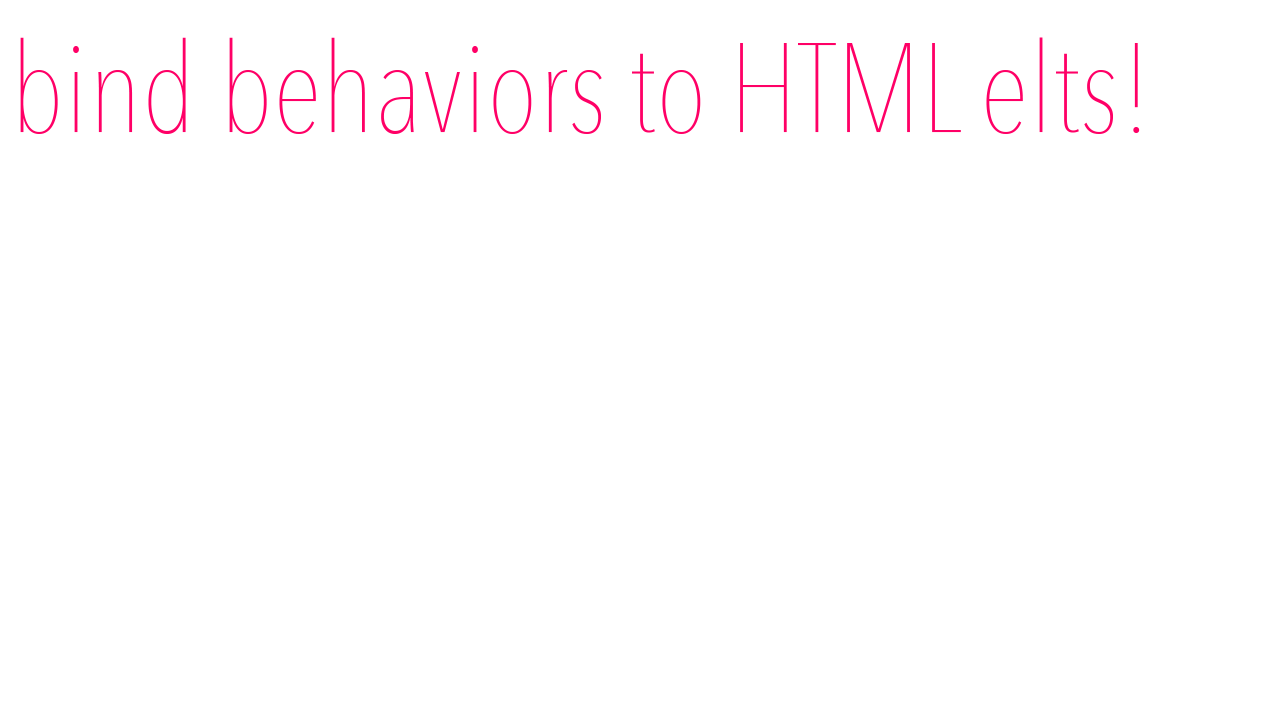
<style>
.page{position:relative;width:1280px;height:720px;background:#ffffff}
.page>*{position:absolute;margin:0}
.t1{font:125px "AvenirNextCondensed-UltraLight";color:#ff0066}
</style>
<div class="page">
<p class="t1" style="left:20px;top:37px;width:1120px;height:97px">bind behaviors to HTML elts!</p>
</div>
